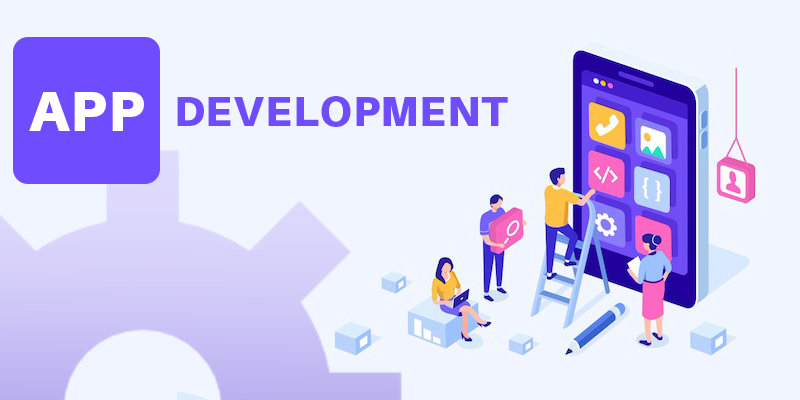
<style>
.page{position:relative;width:800px;height:400px;background:#f1f5ff}
.page>*{position:absolute;margin:0}
.t1{font:56.8px "Aileron-Black";letter-spacing:0.02em;color:#ffffff;text-transform:uppercase}
.t2{font:41.7px "Aileron-Black";letter-spacing:0.02em;color:#6f4cfe;text-transform:uppercase}
</style>
<div class="page">
<p class="t1" style="left:29px;top:92px;width:115px;height:39px">App</p>
<p class="t2" style="left:177px;top:96px;width:331px;height:31px">Development</p>
</div>
